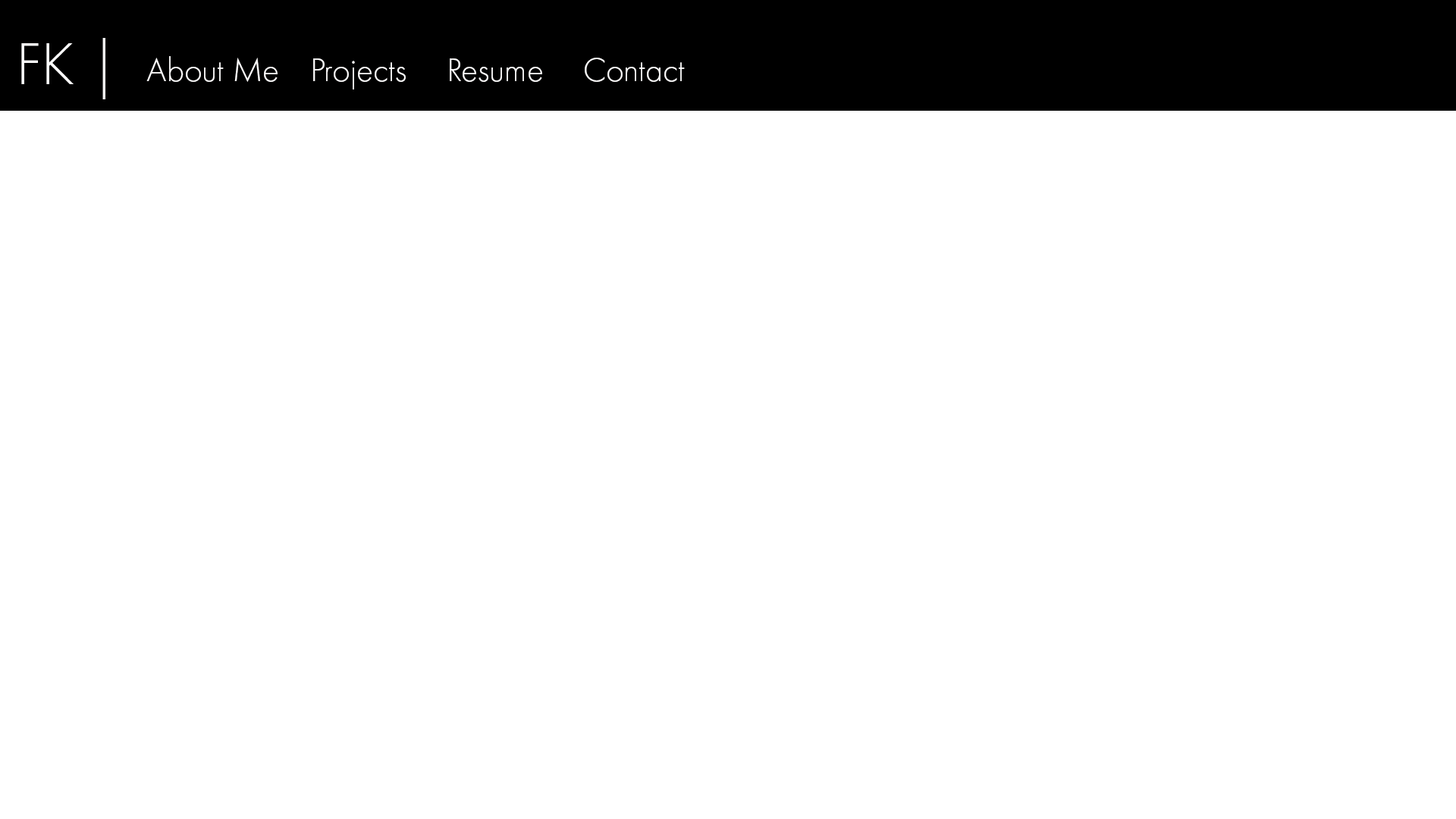
<style>
.page{position:relative;width:1456px;height:819px;background:#ffffff}
.page>*{position:absolute;margin:0}
.t1{font:61.8px "FuturaPT-Light";color:#fffefe}
.t2{font:34.3px "FuturaPT-Light";color:#fffefe}
</style>
<div class="page">
<p class="t1" style="left:21px;top:38px;width:84px;height:61px">FK |</p>
<p class="t2" style="left:146px;top:56px;width:539px;height:33px">About Me  Projects  Resume  Contact</p>
</div>
